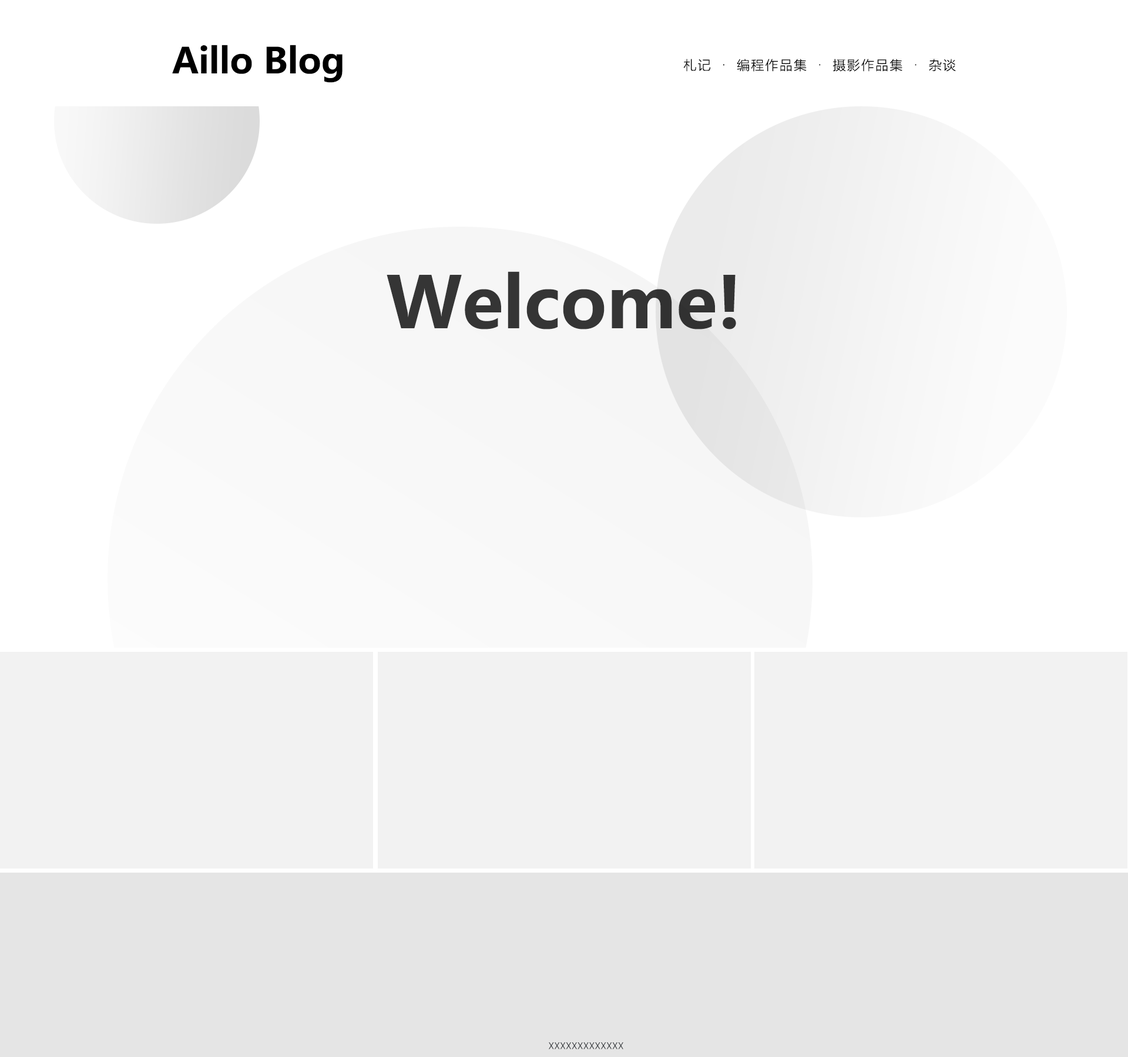
<style>
.page{position:relative;width:1128px;height:1057px;background:#ffffff}
.page>*{position:absolute;margin:0}
.t1{font:35.2px "MicrosoftYaHei-Bold";color:#000000}
.t2{font:12.9px "MicrosoftYaHeiLight";letter-spacing:0.1em;color:#000000}
.t3{font:70.5px "MicrosoftYaHei-Bold";color:#353535}
.t4{font:8.8px "MicrosoftYaHeiLight";letter-spacing:0.05em;color:#23282d}
</style>
<div class="page">
<p class="t1" style="left:172px;top:45px;width:170px;height:38px">Aillo Blog</p>
<p class="t2" style="left:683px;top:59px;width:273px;height:13px">札记  ·  编程作品集  ·  摄影作品集  ·  杂谈</p>
<p class="t3" style="left:387px;top:271px;width:349px;height:59px">Welcome!</p>
<p class="t4" style="left:549px;top:1043px;width:74px;height:7px">XXXXXXXXXXXXX</p>
</div>
